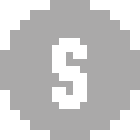
<style>
.page{position:relative;width:140px;height:140px;background:#aaa9a9}
.page>*{position:absolute;margin:0}
.t1{font:85.2px "04b25";letter-spacing:0.014em;color:#ffffff}
</style>
<div class="page">
<p class="t1" style="left:52px;top:38px;width:35px;height:71px">S</p>
</div>
